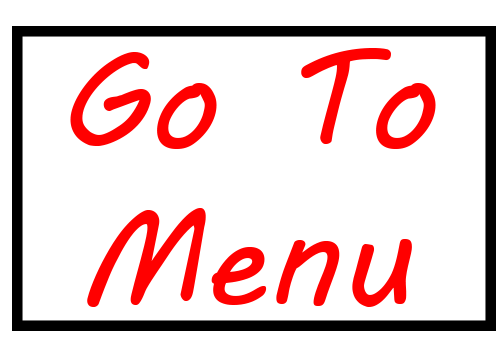
<style>
.page{position:relative;width:504px;height:360px;background:#ffffff}
.page>*{position:absolute;margin:0}
.t1{font:131.9px "MVBoli";color:#ff0000}
</style>
<div class="page">
<p class="t1" style="left:70px;top:48px;width:366px;height:259px;text-align:center">Go To<br>Menu</p>
</div>
